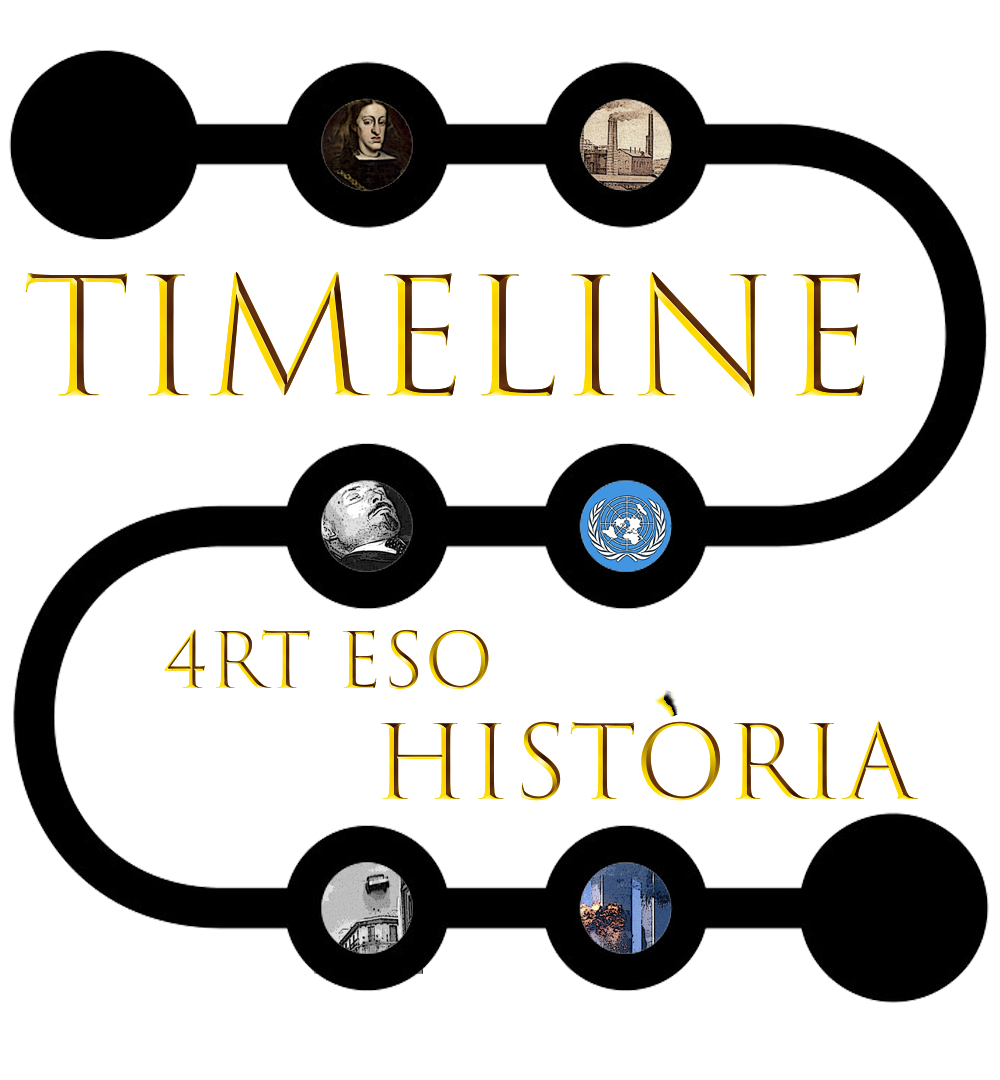
<style>
.page{position:relative;width:1000px;height:1080px;background:#ffffff}
.page>*{position:absolute;margin:0}
.t1{font:160px "TrajanColor-Concept"}
.t2{font:75px "TrajanColor-Concept"}
.t3{font:100px "TrajanColor-Concept"}
</style>
<div class="page">
<p class="t1" style="left:25px;top:272px;width:840px;height:125px">TIMELINE</p>
<p class="t2" style="left:164px;top:629px;width:325px;height:60px">4rt ESO</p>
<p class="t3" style="left:381px;top:721px;width:537px;height:80px">Historia</p>
</div>
